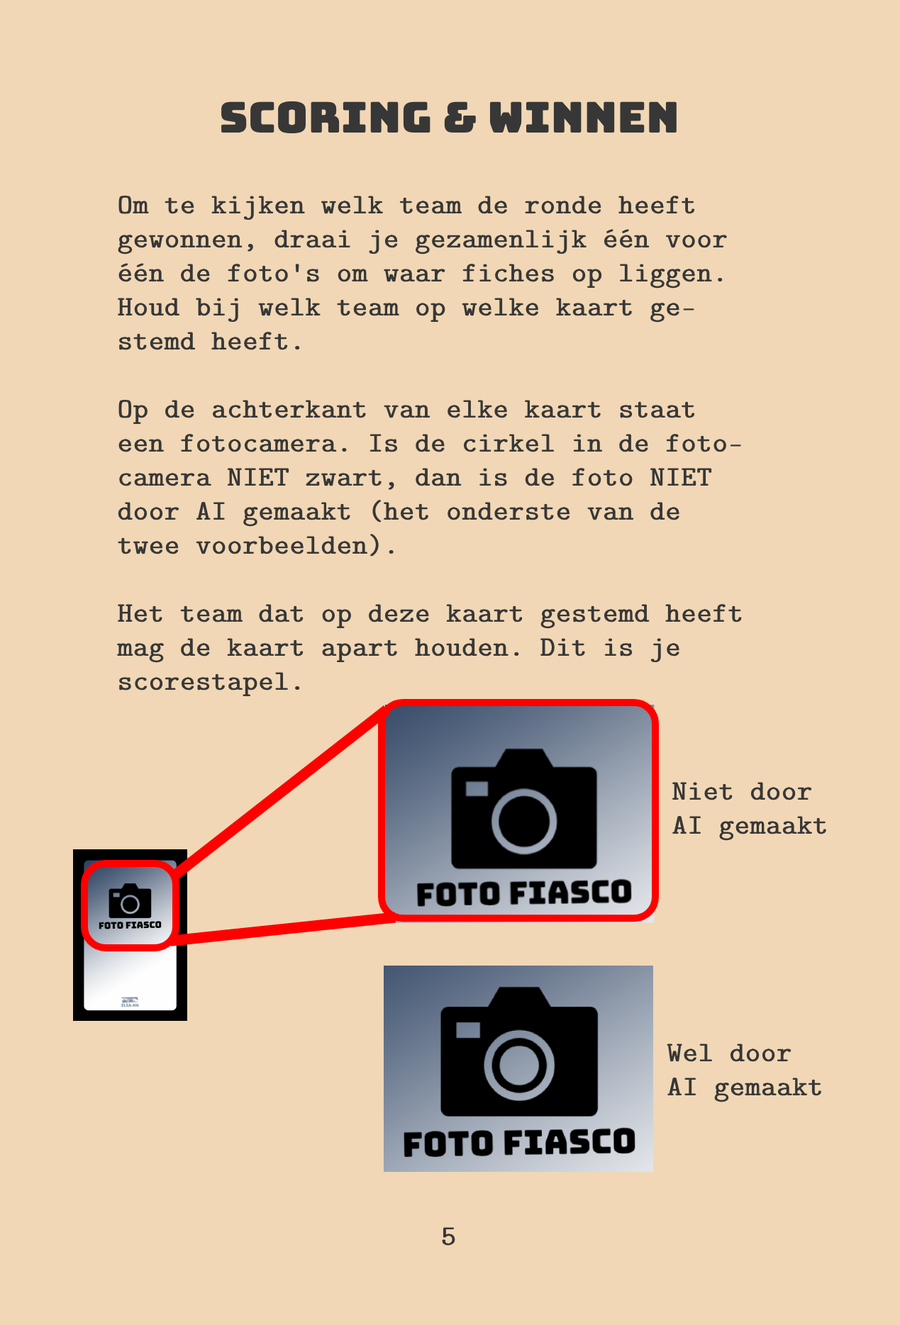
<style>
.page{position:relative;width:900px;height:1325px;background:#f1d7b5}
.page>*{position:absolute;margin:0}
.t1{font:42.5px "Bungee-Regular";color:#373737;font-weight:bold}
.t2{font:28.4px "CMUTypewriter-Regular";color:#373737;font-weight:bold}
</style>
<div class="page">
<p class="t1" style="left:221px;top:101px;width:455px;height:32px">Scoring &amp; Winnen</p>
<p class="t2" style="left:117px;top:196px;width:625px;height:500px">Om te kijken welk team de ronde heeft <br>gewonnen, draai je gezamenlijk één voor <br>één de foto's om waar fiches op liggen. <br>Houd bij welk team op welke kaart ge-<br>stemd heeft.<br><br>Op de achterkant van elke kaart staat<br>een fotocamera. Is de cirkel in de foto-<br>camera NIET zwart, dan is de foto NIET <br>door AI gemaakt (het onderste van de <br>twee voorbeelden). <br><br>Het team dat op deze kaart gestemd heeft <br>mag de kaart apart houden. Dit is je <br>scorestapel.</p>
<p class="t2" style="left:672px;top:782px;width:154px;height:59px">Niet door<br>AI gemaakt</p>
<p class="t2" style="left:667px;top:1044px;width:154px;height:59px">Wel door<br>AI gemaakt</p>
<p class="t2" style="left:442px;top:1227px;width:13px;height:19px">5</p>
</div>
